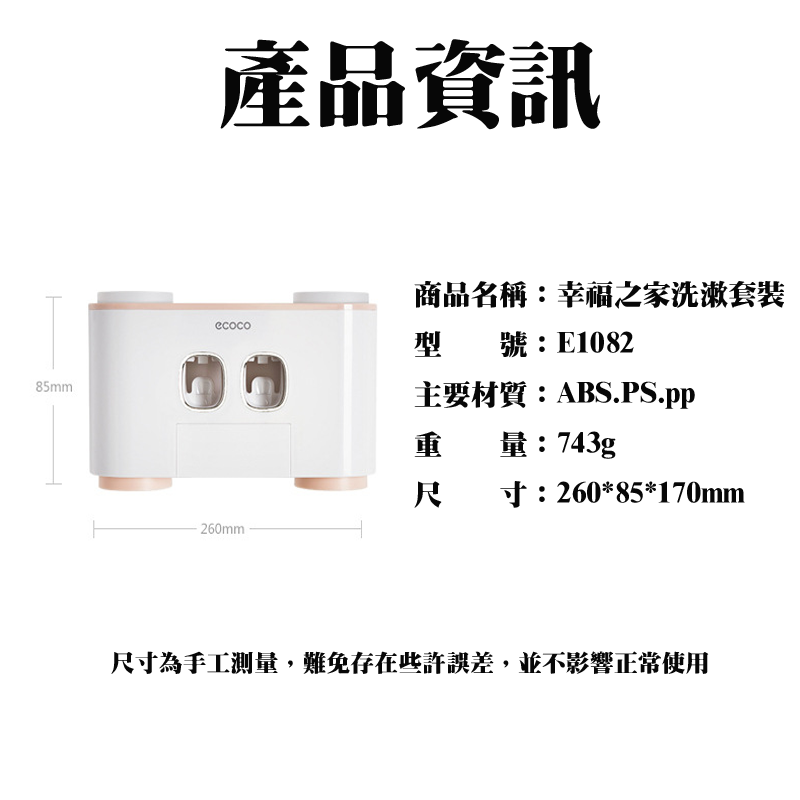
<style>
.page{position:relative;width:800px;height:800px;background:#ffffff}
.page>*{position:absolute;margin:0}
.t1{font:96.4px "HanWangMingBlack";color:#070707}
.t2{font:28.6px "HanWangMingBlack";color:#070707}
.t3{font:24px "HanWangMingBlack";color:#070707}
</style>
<div class="page">
<p class="t1" style="left:220px;top:39px;width:381px;height:91px">產品資訊</p>
<p class="t2" style="left:414px;top:280px;width:371px;height:228px">商品名稱：幸福之家洗漱套裝<br>型    號：E1082<br>主要材質：ABS.PS.pp<br>重    量：743g<br>尺    寸：260*85*170mm</p>
<p class="t3" style="left:111px;top:651px;width:598px;height:23px">尺寸為手工測量，難免存在些許誤差，並不影響正常使用</p>
</div>
